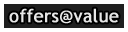
<style>
.page{position:relative;width:128px;height:32px;background:#ffffff}
.page>*{position:absolute;margin:0}
.t1{font:18px "TrebuchetMS";color:#e6e6e6;font-weight:bold}
</style>
<div class="page">
<p class="t1" style="left:9px;top:8px;width:110px;height:16px">offers@value</p>
</div>
